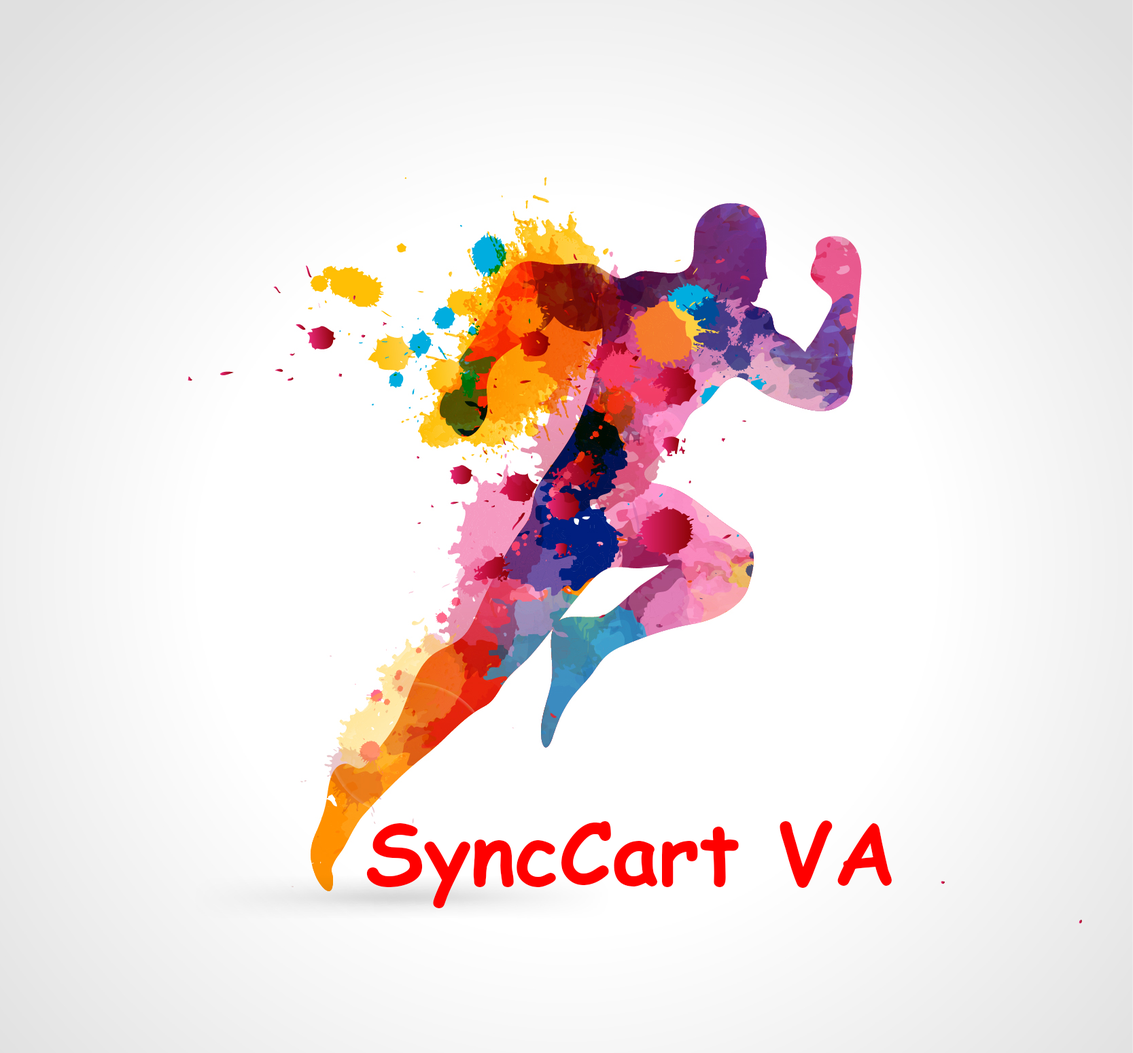
<style>
.page{position:relative;width:1133px;height:1053px;background:#ffffff}
.page>*{position:absolute;margin:0}
.t1{font:84.9px "ComicSansMS-Bold";color:#ff0000}
</style>
<div class="page">
<p class="t1" style="left:366px;top:820px;width:526px;height:88px">SyncCart VA</p>
</div>
